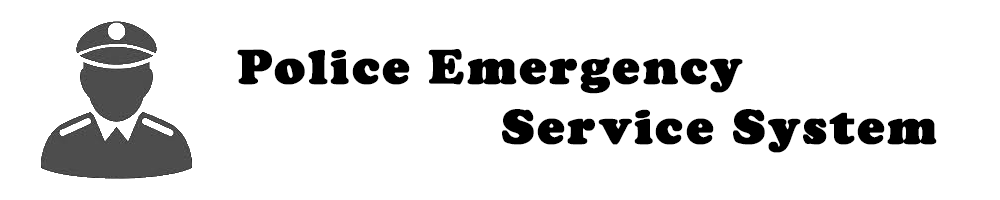
<style>
.page{position:relative;width:1000px;height:200px;background:#ffffff}
.page>*{position:absolute;margin:0}
.t1{font:50px "CooperBlack";letter-spacing:0.05em;color:#000000;font-weight:bold}
</style>
<div class="page">
<p class="t1" style="left:237px;top:49px;width:700px;height:104px;text-align:center">Police Emergency <br>                           Service System</p>
</div>
